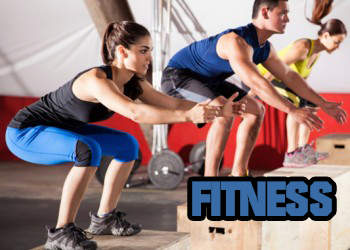
<style>
.page{position:relative;width:350px;height:250px}
.page>*{position:absolute;margin:0}
.t1{font:48px "Autumn";letter-spacing:-0.025em;color:#396ca6}
</style>
<div class="page">
<p class="t1" style="left:192px;top:181px;width:140px;height:35px">FITNESS</p>
</div>
